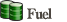
<style>
.page{position:relative;width:67px;height:22px;background:#ffffff}
.page>*{position:absolute;margin:0}
.t1{font:14px "RyuminPro-ExBold";letter-spacing:-0.08em;color:#4c4741}
</style>
<div class="page">
<p class="t1" style="left:27px;top:8px;width:25px;height:12px">Fuel</p>
</div>
